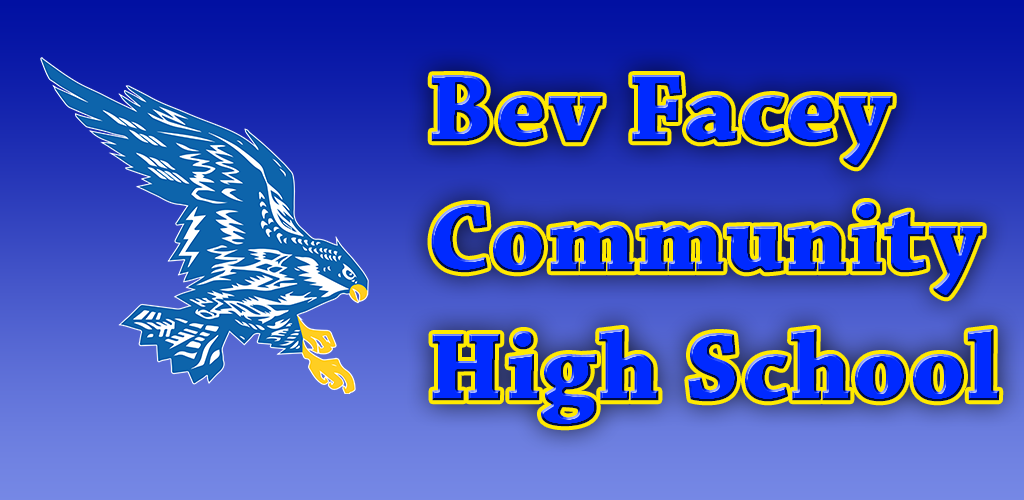
<style>
.page{position:relative;width:1024px;height:500px}
.page>*{position:absolute;margin:0}
.t1{font:100px/129.2px "ChaparralPro-Bold";color:#002aff;font-weight:bold}
</style>
<div class="page">
<p class="t1" style="left:431px;top:75px;width:569px;height:352px">Bev Facey<br>Community<br>High School</p>
</div>
